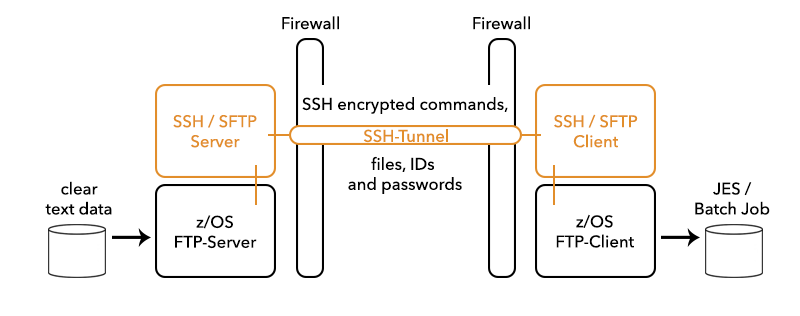
<style>
.page{position:relative;width:800px;height:316px;background:#ffffff}
.page>*{position:absolute;margin:0}
.t1{font:16.7px "AvenirNext-Medium";color:#000000}
.t2{font:16.7px "AvenirNext-Medium";color:#e28e2b}
</style>
<div class="page">
<p class="t1" style="left:282px;top:16px;width:57px;height:14px">Firewall</p>
<p class="t1" style="left:473px;top:16px;width:57px;height:14px">Firewall</p>
<p class="t1" style="left:302px;top:97px;width:206px;height:97px;text-align:center">SSH encrypted commands,<br><br><br>files, IDs <br>and passwords</p>
<p class="t2" style="left:173px;top:114px;width:84px;height:34px;text-align:center">SSH / SFTP<br>Server</p>
<p class="t2" style="left:554px;top:114px;width:84px;height:34px;text-align:center">SSH / SFTP<br>Client</p>
<p class="t2" style="left:363px;top:129px;width:85px;height:14px">SSH-Tunnel</p>
<p class="t1" style="left:45px;top:181px;width:67px;height:34px;text-align:center">clear<br>text data</p>
<p class="t1" style="left:695px;top:182px;width:75px;height:33px;text-align:center">JES /<br>Batch Job</p>
<p class="t1" style="left:175px;top:215px;width:82px;height:34px;text-align:center">z/OS<br>FTP-Server</p>
<p class="t1" style="left:556px;top:214px;width:78px;height:34px;text-align:center">z/OS<br>FTP-Client</p>
</div>
